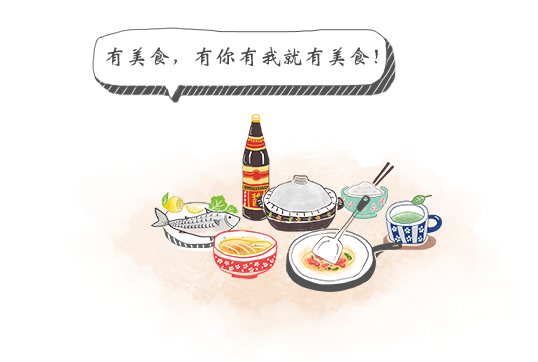
<style>
.page{position:relative;width:538px;height:362px;background:#ffffff}
.page>*{position:absolute;margin:0}
.t1{font:22px "STXinwei";letter-spacing:0.01em;color:#484848}
</style>
<div class="page">
<p class="t1" style="left:106px;top:46px;width:272px;height:21px">有美食，有你有我就有美食！</p>
</div>
